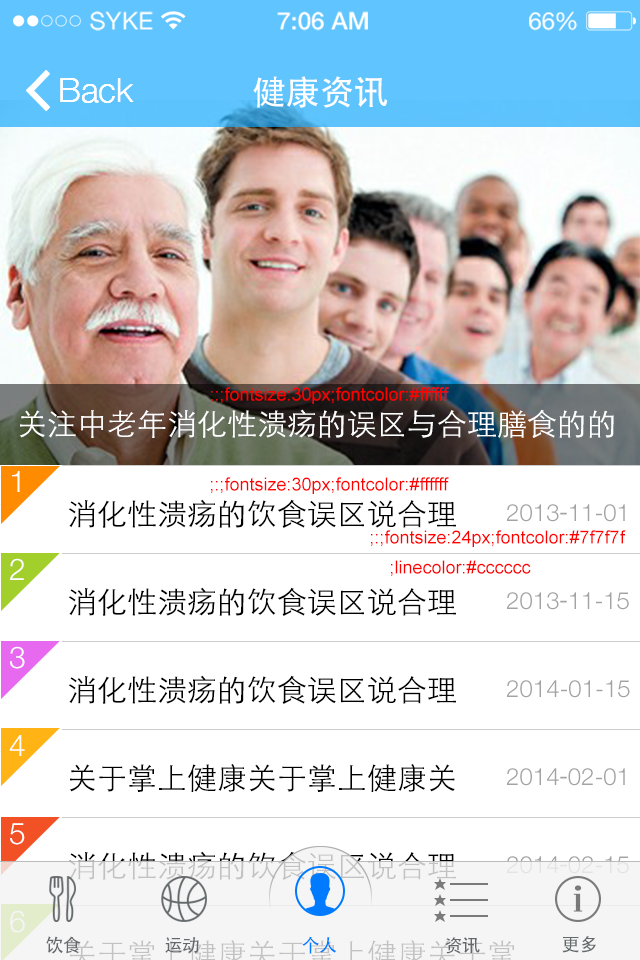
<style>
.page{position:relative;width:640px;height:960px;background:#ffffff}
.page>*{position:absolute;margin:0}
.t1{font:34px "HelveticaNeue-Light";color:#ffffff}
.t2{font:34px "AdobeHeitiStd-Regular";color:#ffffff}
.t3{font:18px "ArialMT";color:#ff0000}
.t4{font:30px "STXihei";color:#ffffff}
.t5{font:24px/88px "HelveticaNeue-Light";color:#a3a3a3}
.t6{font:24px/88px "AdobeHeitiStd-Regular";color:#a3a3a3}
.t7{font:18px "AdobeHeitiStd-Regular";letter-spacing:-0.025em;color:#63686b}
.t8{font:18px "AdobeHeitiStd-Regular";letter-spacing:-0.025em;color:#007aff}
.t9{font:18px "AdobeHeitiStd-Regular";color:#63686b}
</style>
<div class="page">
<p class="t1" style="left:60px;top:78px;width:74px;height:25px">Back</p>
<p class="t1" style="left:60px;top:78px;width:74px;height:25px">Back</p>
<p class="t2" style="left:253px;top:76px;width:135px;height:32px">健康资讯</p>
<p class="t3" style="left:211px;top:387px;width:238px;height:17px">fontsize:30px;fontcolor:#ffffff;:;</p>
<p class="t4" style="left:19px;top:409px;width:595px;height:29px">关注中老年消化性溃疡的误区与合理膳食的的</p>
<p class="t3" style="left:211px;top:477px;width:238px;height:17px">fontsize:30px;fontcolor:#ffffff;:;</p>
<p class="t5" style="left:506px;top:504px;width:124px;height:370px">2013<span class="t6">-</span>11-01<br>2013<span class="t6">-</span>11-15<br>2014-01-15<br>2014<span class="t6">-</span>02-01<br>2014<span class="t6">-</span>02-15</p>
<p class="t3" style="left:371px;top:530px;width:255px;height:17px">fontsize:24px;fontcolor:#7f7f7f;:;</p>
<p class="t3" style="left:391px;top:560px;width:140px;height:17px">linecolor:#cccccc;</p>
<p class="t7" style="left:46px;top:936px;width:35px;height:18px">饮食</p>
<p class="t7" style="left:165px;top:937px;width:34px;height:16px">运动</p>
<p class="t8" style="left:302px;top:936px;width:35px;height:18px">个人</p>
<p class="t7" style="left:445px;top:937px;width:35px;height:17px">资讯</p>
<p class="t9" style="left:562px;top:936px;width:34px;height:17px">更多</p>
</div>
